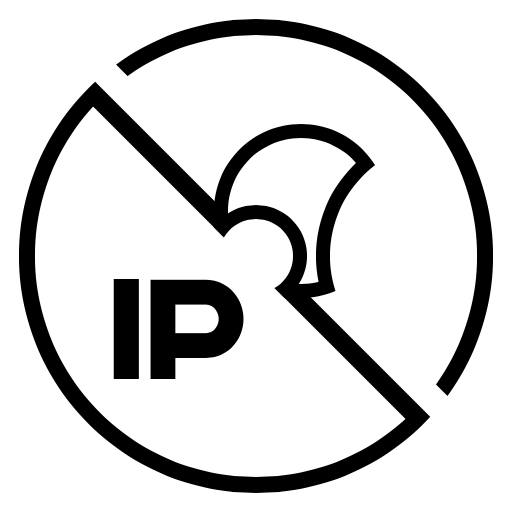
<style>
.page{position:relative;width:512px;height:512px;background:#ffffff}
.page>*{position:absolute;margin:0}
.t1{font:158px "SpinCycleOT";color:#000000}
</style>
<div class="page">
<p class="t1" style="left:113px;top:278px;width:131px;height:101px">IP</p>
</div>
